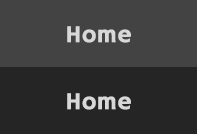
<style>
.page{position:relative;width:197px;height:134px;background:#434343}
.page>*{position:absolute;margin:0}
.t1{font:24px "HammersmithOne-Regular";color:#d8d8d8;font-weight:bold}
</style>
<div class="page">
<p class="t1" style="left:67px;top:26px;width:64px;height:17px">Home</p>
<p class="t1" style="left:67px;top:93px;width:64px;height:17px">Home</p>
</div>
